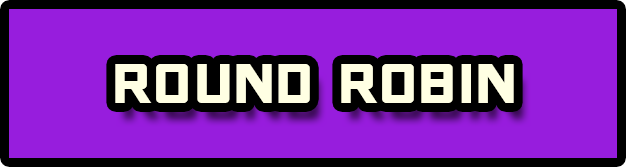
<style>
.page{position:relative;width:626px;height:167px;background:#971ddd}
.page>*{position:absolute;margin:0}
.t1{font:90px "ONRAMP";color:#ffffe3}
</style>
<div class="page">
<p class="t1" style="left:115px;top:64px;width:399px;height:39px">round robin</p>
</div>
